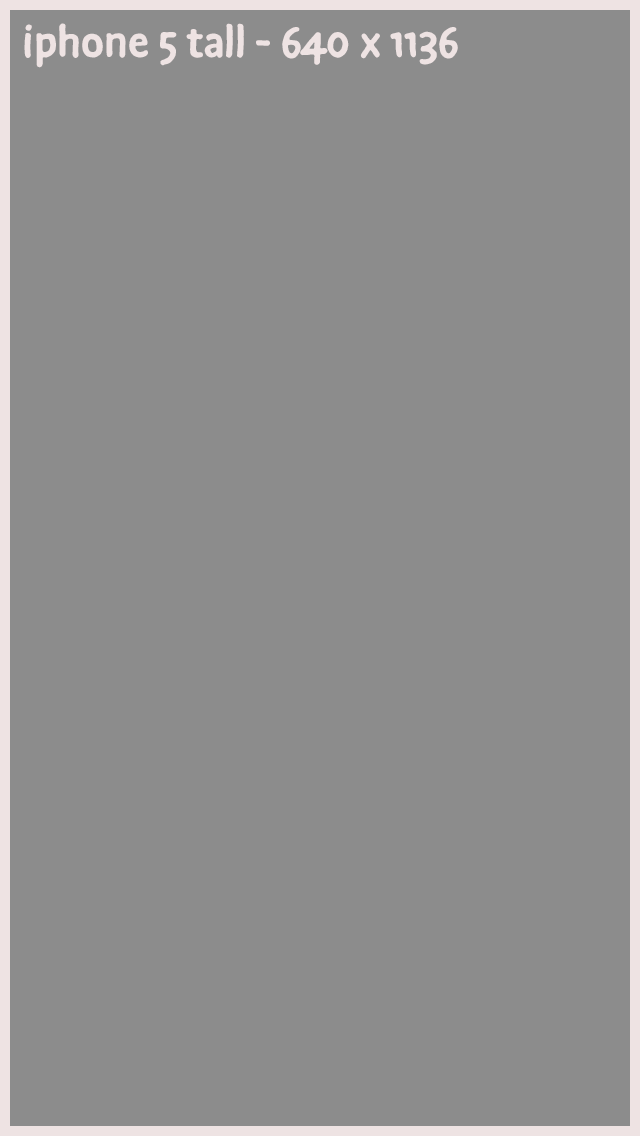
<style>
.page{position:relative;width:640px;height:1136px;background:#8c8c8c}
.page>*{position:absolute;margin:0}
.t1{font:48px "DuperPro-Bold";color:#eee3e3}
</style>
<div class="page">
<p class="t1" style="left:24px;top:23px;width:434px;height:45px">iphone 5 tall - 640 x 1136</p>
</div>
